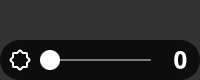
<style>
.page{position:relative;width:200px;height:80px;background:#333333}
.page>*{position:absolute;margin:0}
.t1{font:24px "NotoSans-Bold";color:#ffffff}
</style>
<div class="page">
<p class="t1" style="left:174px;top:51px;width:13px;height:18px">0</p>
</div>
